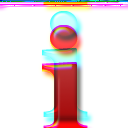
<style>
.page{position:relative;width:128px;height:128px;background:#ffffff}
.page>*{position:absolute;margin:0}
.t1{font:140px "Georgia-Bold"}
</style>
<div class="page">
<p class="t1" style="left:42px;top:9px;width:46px;height:106px">i</p>
</div>
